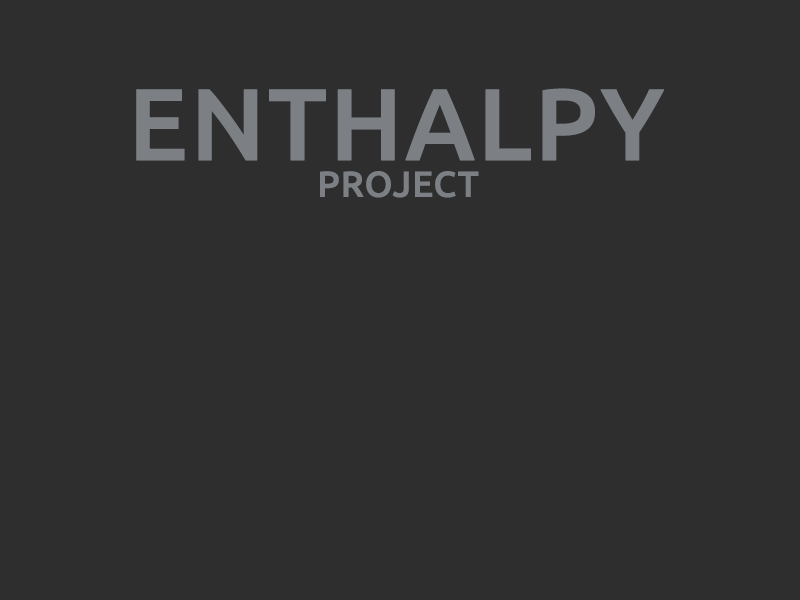
<style>
.page{position:relative;width:800px;height:600px;background:#2e2e2e}
.page>*{position:absolute;margin:0}
.t1{font:101.5px "Ubuntu-Medium";color:#7c8084;font-weight:bold}
.t2{font:36px "Ubuntu-Medium";color:#7c8084;font-weight:bold}
</style>
<div class="page">
<p class="t1" style="left:136px;top:88px;width:529px;height:73px">ENTHALPY</p>
<p class="t2" style="left:320px;top:171px;width:159px;height:27px">PROJECT</p>
</div>
